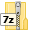
<style>
.page{position:relative;width:32px;height:32px;background:#ffffff}
.page>*{position:absolute;margin:0}
.t1{font:10px "Tahoma-Bold";color:#000000}
</style>
<div class="page">
<p class="t1" style="left:3px;top:16px;width:11px;height:7px">7z</p>
</div>
